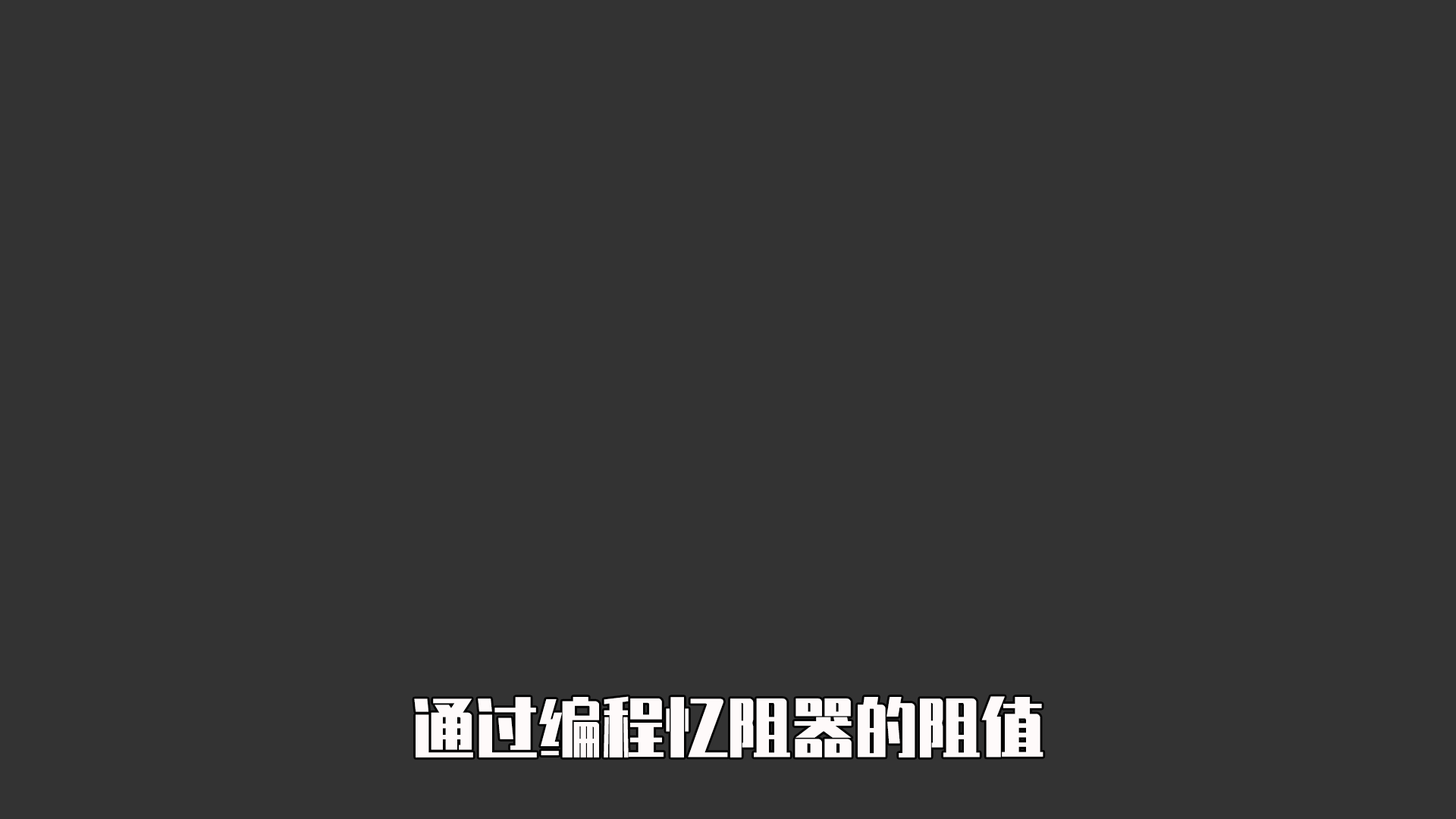
<style>
.page{position:relative;width:1456px;height:819px;background:#333333}
.page>*{position:absolute;margin:0}
.t1{font:63.2px "ZhenyanGB-Regular";color:#fefafa}
</style>
<div class="page">
<p class="t1" style="left:414px;top:696px;width:629px;height:62px">通过编程忆阻器的阻值</p>
</div>
